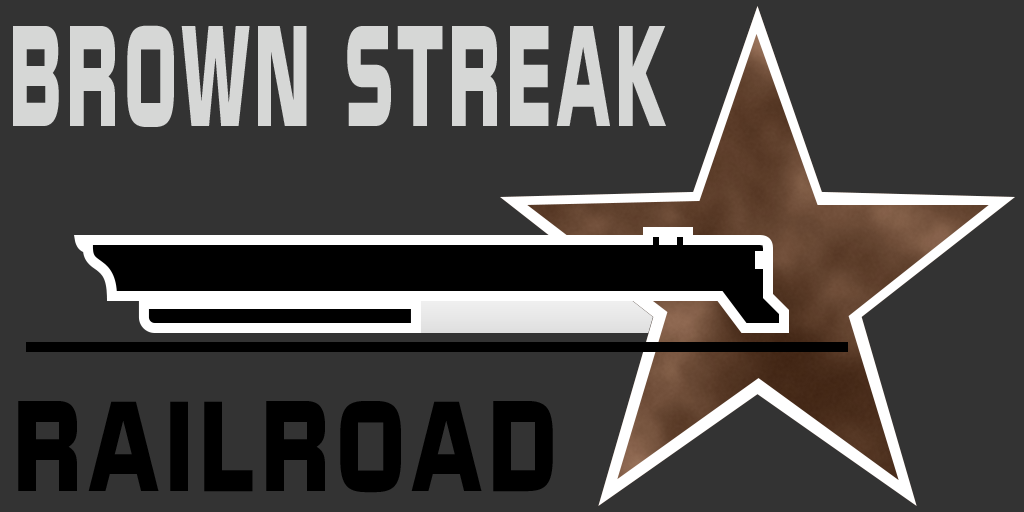
<style>
.page{position:relative;width:1024px;height:512px;background:#333333}
.page>*{position:absolute;margin:0}
.t1{font:123.9px "NissanOpti";letter-spacing:0.1em;color:#d6d7d6;scale:0.48 1}
.t2{font:111px "NissanOpti";letter-spacing:0.1em;color:#000000;scale:0.71 1}
</style>
<div class="page">
<p class="t1" style="left:13px;top:25px;width:653px;height:102px">BROWN STREAK</p>
<p class="t2" style="left:18px;top:401px;width:535px;height:92px">RAILROAD</p>
</div>
